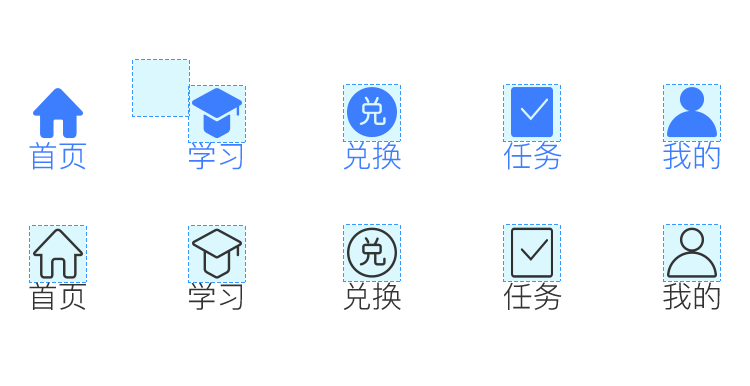
<style>
.page{position:relative;width:750px;height:386px;background:#ffffff}
.page>*{position:absolute;margin:0}
.t1{font:30px "PingFang-SC-Regular";color:#3d7eff;text-transform:uppercase}
.t2{font:30px "PingFang-SC-Regular";color:#333333;text-transform:uppercase}
</style>
<div class="page">
<p class="t1" style="left:29px;top:142px;width:57px;height:28px">首页</p>
<p class="t1" style="left:189px;top:141px;width:53px;height:29px">学习</p>
<p class="t1" style="left:343px;top:142px;width:58px;height:28px">兑换</p>
<p class="t1" style="left:504px;top:142px;width:58px;height:28px">任务</p>
<p class="t1" style="left:663px;top:142px;width:57px;height:27px">我的</p>
<p class="t2" style="left:29px;top:282px;width:57px;height:28px">首页</p>
<p class="t2" style="left:189px;top:282px;width:53px;height:28px">学习</p>
<p class="t2" style="left:343px;top:282px;width:58px;height:28px">兑换</p>
<p class="t2" style="left:504px;top:282px;width:58px;height:28px">任务</p>
<p class="t2" style="left:663px;top:282px;width:57px;height:28px">我的</p>
</div>
